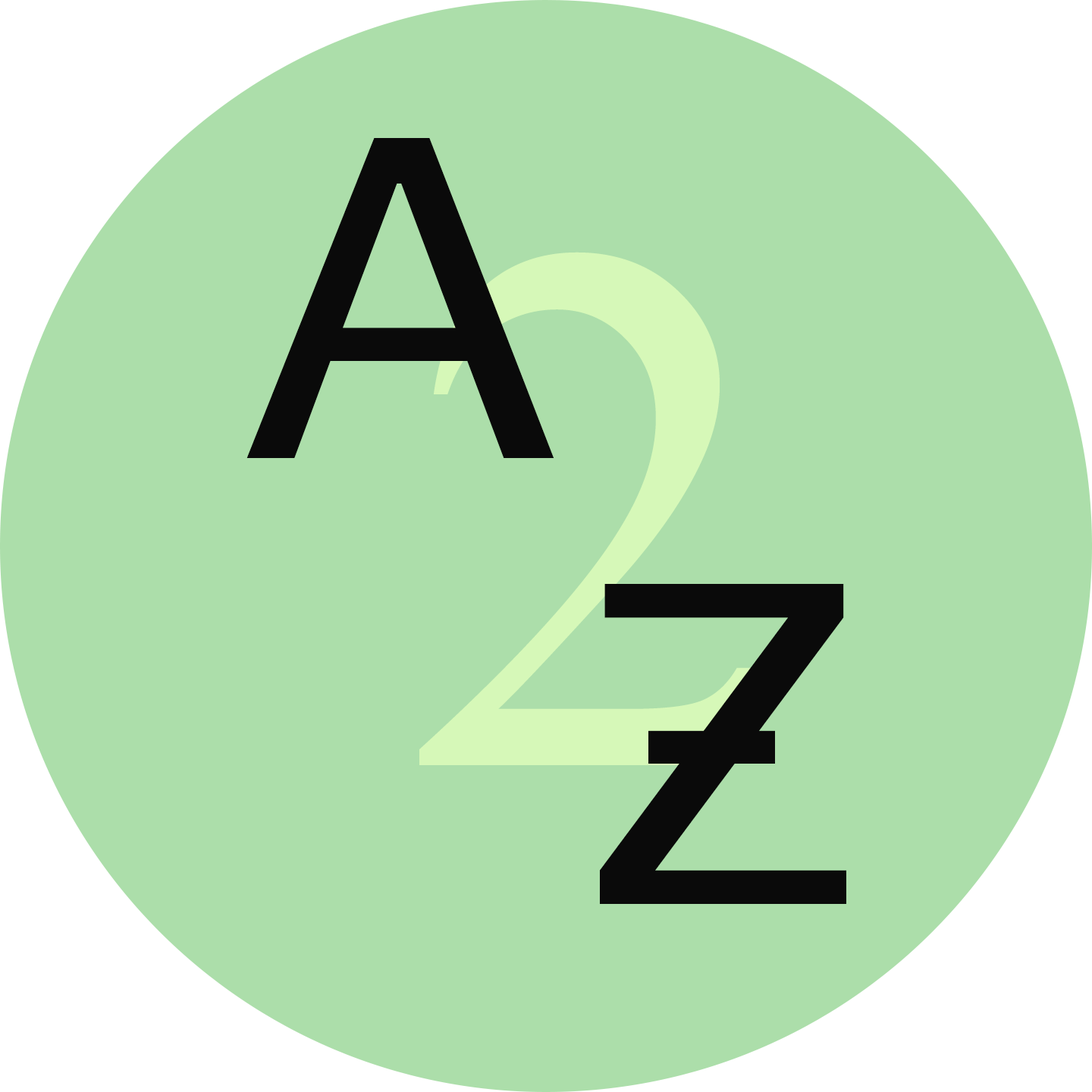
<style>
.page{position:relative;width:1092px;height:1092px;background:#acdeaa}
.page>*{position:absolute;margin:0}
.t1{font:492.9px "Play-Regular";letter-spacing:0.04em;color:#0a0a0a;text-transform:uppercase}
.t2{font:455px "Play-Regular";letter-spacing:0.04em;color:#0a0a0a;text-transform:uppercase}
</style>
<div class="page">
<p class="t1" style="left:246px;top:138px;width:308px;height:320px">A</p>
<p class="t1" style="left:600px;top:584px;width:246px;height:320px">Z</p>
<p class="t2" style="left:648px;top:730px;width:127px;height:34px">-</p>
</div>
